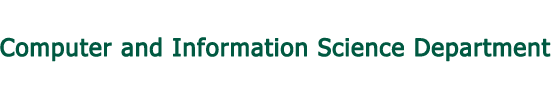
<style>
.page{position:relative;width:551px;height:100px;background:#ffffff}
.page>*{position:absolute;margin:0}
.t1{font:24px "Tahoma";letter-spacing:0.02em;color:#005941;font-weight:bold}
</style>
<div class="page">
<p class="t1" style="left:0px;top:37px;width:551px;height:25px">Computer and Information Science Department</p>
</div>
